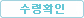
<style>
.page{position:relative;width:84px;height:18px;background:#fefefe}
.page>*{position:absolute;margin:0}
.t1{font:12px "morris9";color:#65c7d5;font-weight:bold}
</style>
<div class="page">
<p class="t1" style="left:20px;top:4px;width:44px;height:10px">수령확인</p>
</div>
